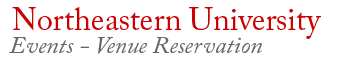
<style>
.page{position:relative;width:344px;height:62px;background:#ffffff}
.page>*{position:absolute;margin:0}
.t1{font:32px "ACaslonPro-Regular";color:#cc0000}
.t2{font:24px "ACaslonPro-Italic";color:#666666}
</style>
<div class="page">
<p class="t1" style="left:12px;top:7px;width:309px;height:32px">Northeastern University</p>
<p class="t2" style="left:9px;top:37px;width:253px;height:17px">Events - Venue Reservation</p>
</div>
